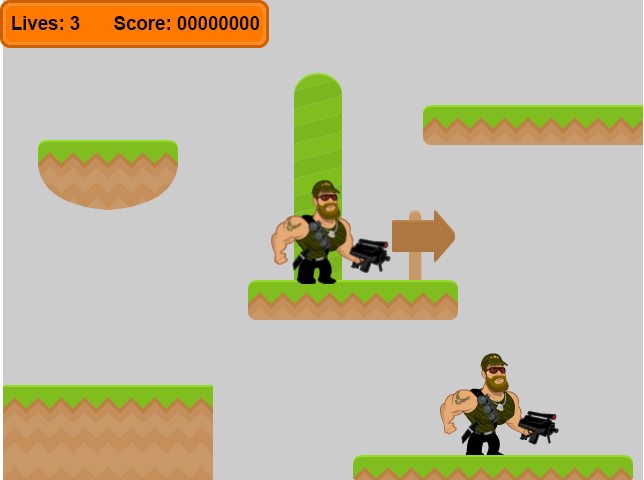
<style>
.page{position:relative;width:644px;height:480px;background:#cccccc}
.page>*{position:absolute;margin:0}
.t1{font:18.7px "Arial-BoldMT";color:#030303}
</style>
<div class="page">
<p class="t1" style="left:12px;top:16px;width:68px;height:14px">Lives: 3</p>
<p class="t1" style="left:114px;top:16px;width:145px;height:14px">Score: 00000000</p>
</div>
